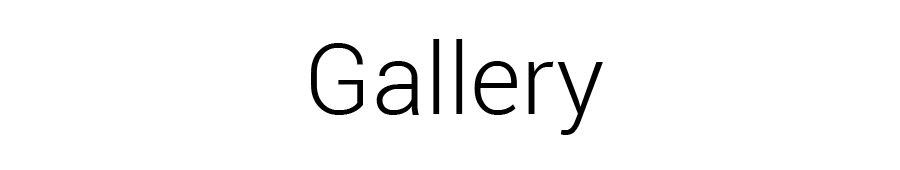
<style>
.page{position:relative;width:900px;height:170px;background:#ffffff}
.page>*{position:absolute;margin:0}
.t1{font:99.2px "Roboto-Light";color:#000000}
</style>
<div class="page">
<p class="t1" style="left:311px;top:39px;width:292px;height:96px">Gallery</p>
</div>
